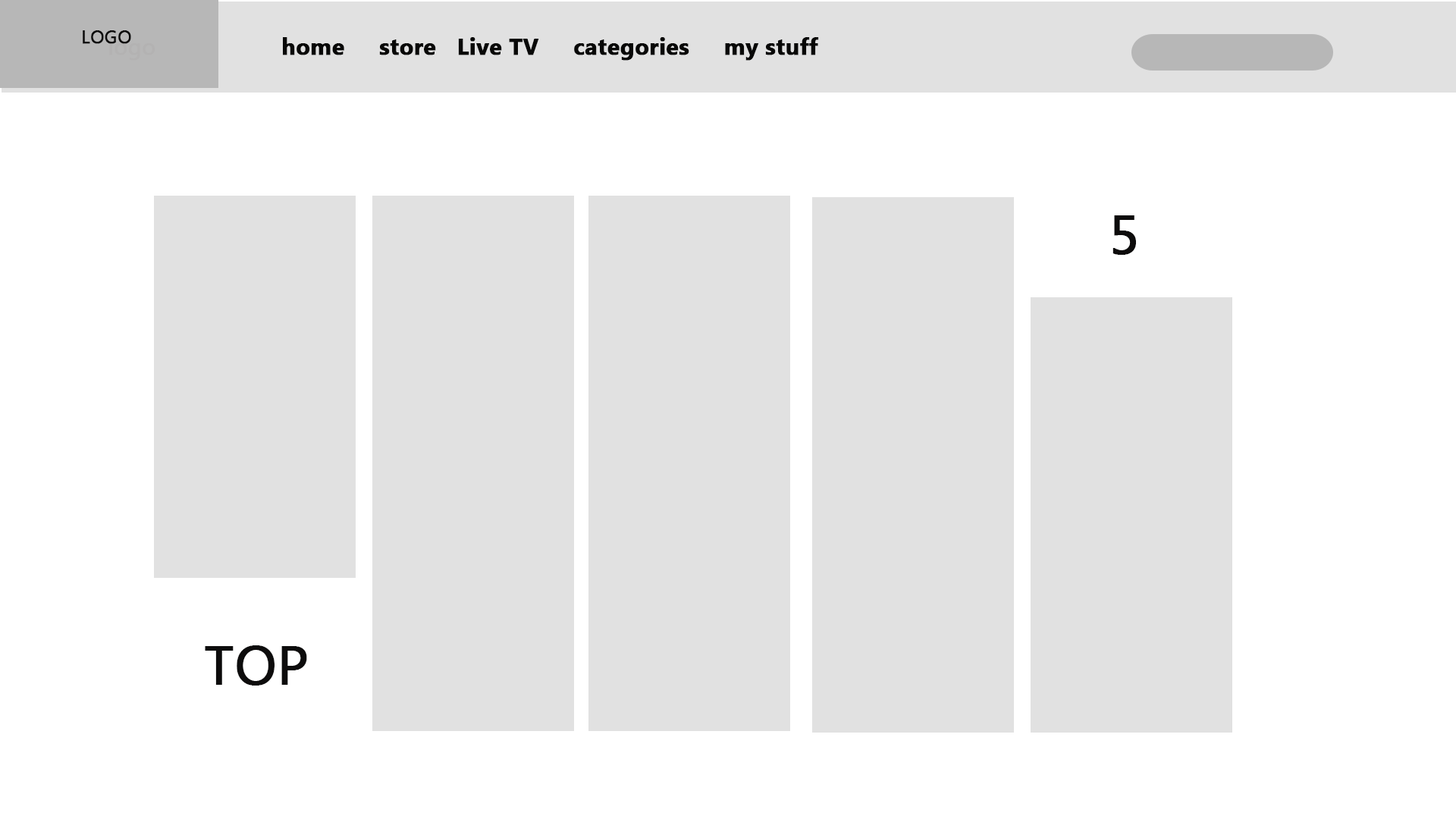
<style>
.page{position:relative;width:1456px;height:819px;background:#e1e1e1}
.page>*{position:absolute;margin:0}
.t1{font:18.2px "MyanmarText";color:#0d0c0c;font-weight:bold}
.t2{font:22.7px "MyanmarText-Bold";color:#080807;font-weight:bold}
.t3{font:54.6px "MyanmarText";color:#0d0c0c;font-weight:bold}
</style>
<div class="page">
<p class="t1" style="left:83px;top:30px;width:48px;height:14px">LOGO</p>
<p class="t2" style="left:283px;top:37px;width:536px;height:24px">home     store   Live TV     categories     my stuff</p>
<p class="t3" style="left:1112px;top:215px;width:24px;height:40px">5</p>
<p class="t3" style="left:205px;top:645px;width:102px;height:41px">TOP</p>
</div>
